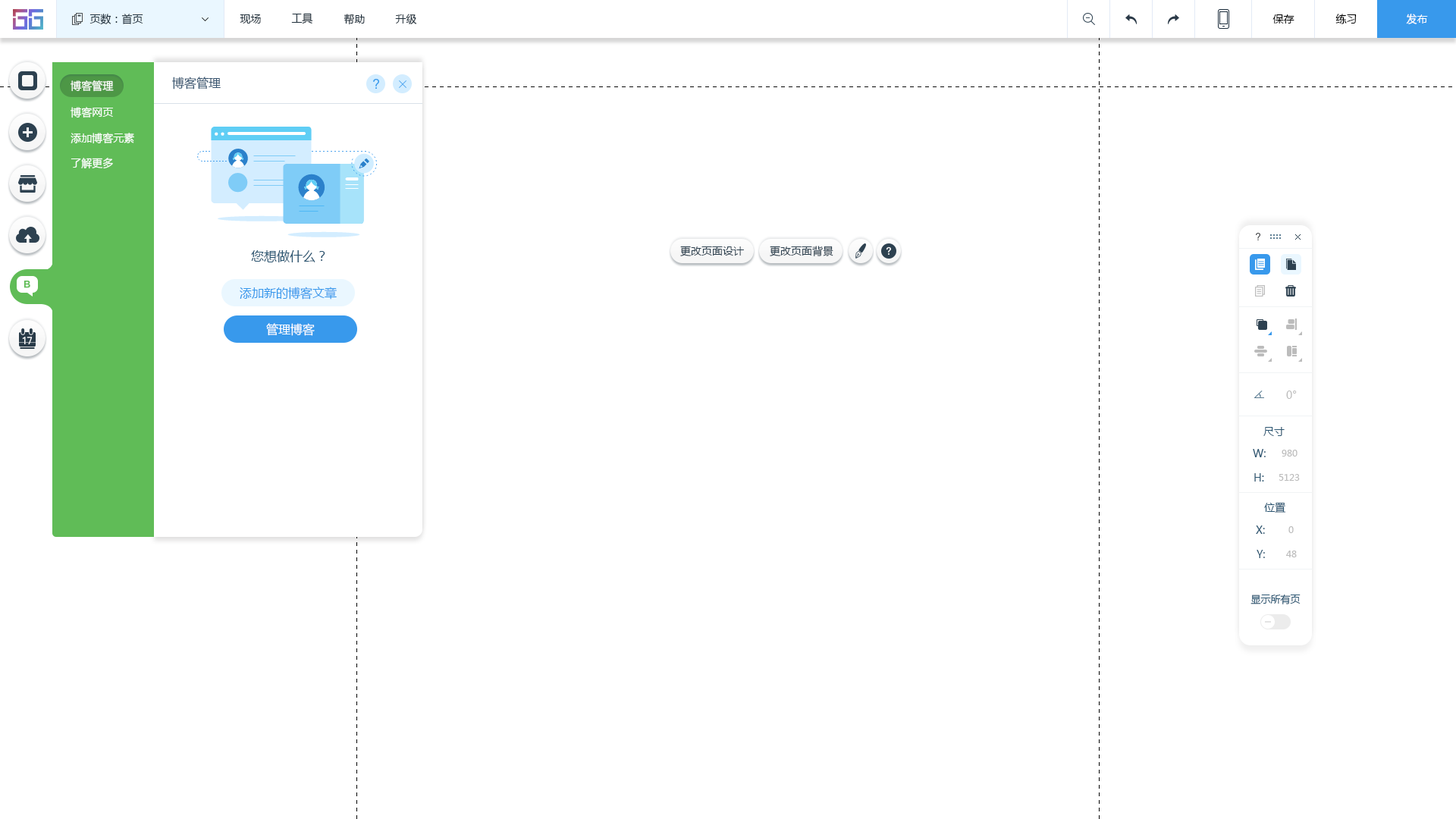
<style>
.page{position:relative;width:1456px;height:819px;background:#ffffff}
.page>*{position:absolute;margin:0}
.t1{font:10.6px "MicrosoftYaHei";color:#20303c}
.t2{font:10.6px "MicrosoftYaHei";color:#000000}
.t3{font:10.6px "MicrosoftYaHei";color:#ffffff}
.t4{font:12.1px "MicrosoftYaHei";color:#395671}
.t5{font:10.6px "MicrosoftYaHei";color:#2d4150}
.t6{font:12.9px "MicrosoftYaHei";color:#2b5672}
.t7{font:12.1px "MicrosoftYaHei";color:#3899ec}
.t8{font:12.1px "MicrosoftYaHei";color:#ffffff}
.t9{font:10.6px "MicrosoftYaHei";color:#bcbcbc}
.t10{font:10.6px "MicrosoftYaHei";color:#2b5672}
.t11{font:9.1px "MicrosoftYaHei";color:#bcbcbc}
.t12{font:9.9px "MicrosoftYaHei";color:#2b5672}
</style>
<div class="page">
<p class="t1" style="left:89px;top:14px;width:54px;height:11px">页数：首页</p>
<p class="t1" style="left:240px;top:14px;width:21px;height:10px">现场</p>
<p class="t1" style="left:291px;top:13px;width:22px;height:11px">工具</p>
<p class="t1" style="left:344px;top:14px;width:21px;height:11px">帮助</p>
<p class="t1" style="left:395px;top:14px;width:22px;height:10px">升级</p>
<p class="t2" style="left:1272px;top:14px;width:22px;height:10px">保存</p>
<p class="t2" style="left:1335px;top:14px;width:22px;height:10px">练习</p>
<p class="t3" style="left:1406px;top:14px;width:22px;height:10px">发布</p>
<p class="t4" style="left:172px;top:77px;width:49px;height:12px">博客管理</p>
<p class="t3" style="left:71px;top:80px;width:43px;height:12px">博客管理</p>
<p class="t3" style="left:71px;top:107px;width:42px;height:11px">博客网页</p>
<p class="t3" style="left:71px;top:133px;width:63px;height:11px">添加博客元素</p>
<p class="t3" style="left:71px;top:158px;width:42px;height:11px">了解更多</p>
<p class="t5" style="left:680px;top:246px;width:64px;height:10px">更改页面设计</p>
<p class="t5" style="left:770px;top:246px;width:63px;height:10px">更改页面背景</p>
<p class="t6" style="left:251px;top:250px;width:74px;height:12px">您想做什么？</p>
<p class="t7" style="left:240px;top:287px;width:97px;height:13px">添加新的博客文章</p>
<p class="t8" style="left:266px;top:323px;width:49px;height:13px">管理博客</p>
<p class="t9" style="left:1286px;top:391px;width:11px;height:8px">0°</p>
<p class="t10" style="left:1263px;top:427px;width:22px;height:9px">尺寸</p>
<p class="t10" style="left:1253px;top:449px;width:13px;height:8px">W:</p>
<p class="t11" style="left:1282px;top:450px;width:15px;height:7px">980</p>
<p class="t10" style="left:1254px;top:473px;width:10px;height:9px">H:</p>
<p class="t11" style="left:1279px;top:474px;width:21px;height:7px">5123</p>
<p class="t10" style="left:1264px;top:502px;width:22px;height:11px">位置</p>
<p class="t10" style="left:1256px;top:526px;width:9px;height:8px">X:</p>
<p class="t11" style="left:1288px;top:526px;width:6px;height:7px">0</p>
<p class="t10" style="left:1257px;top:550px;width:8px;height:8px">Y:</p>
<p class="t11" style="left:1286px;top:551px;width:11px;height:6px">48</p>
<p class="t12" style="left:1250px;top:594px;width:51px;height:10px">显示所有页</p>
</div>
